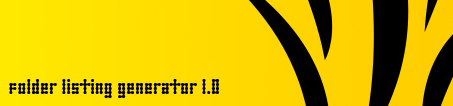
<style>
.page{position:relative;width:453px;height:106px}
.page>*{position:absolute;margin:0}
.t1{font:24px "SkeletorStance";color:#000000}
</style>
<div class="page">
<p class="t1" style="left:9px;top:79px;width:210px;height:20px">Folder Listing Generator 1.0</p>
</div>
